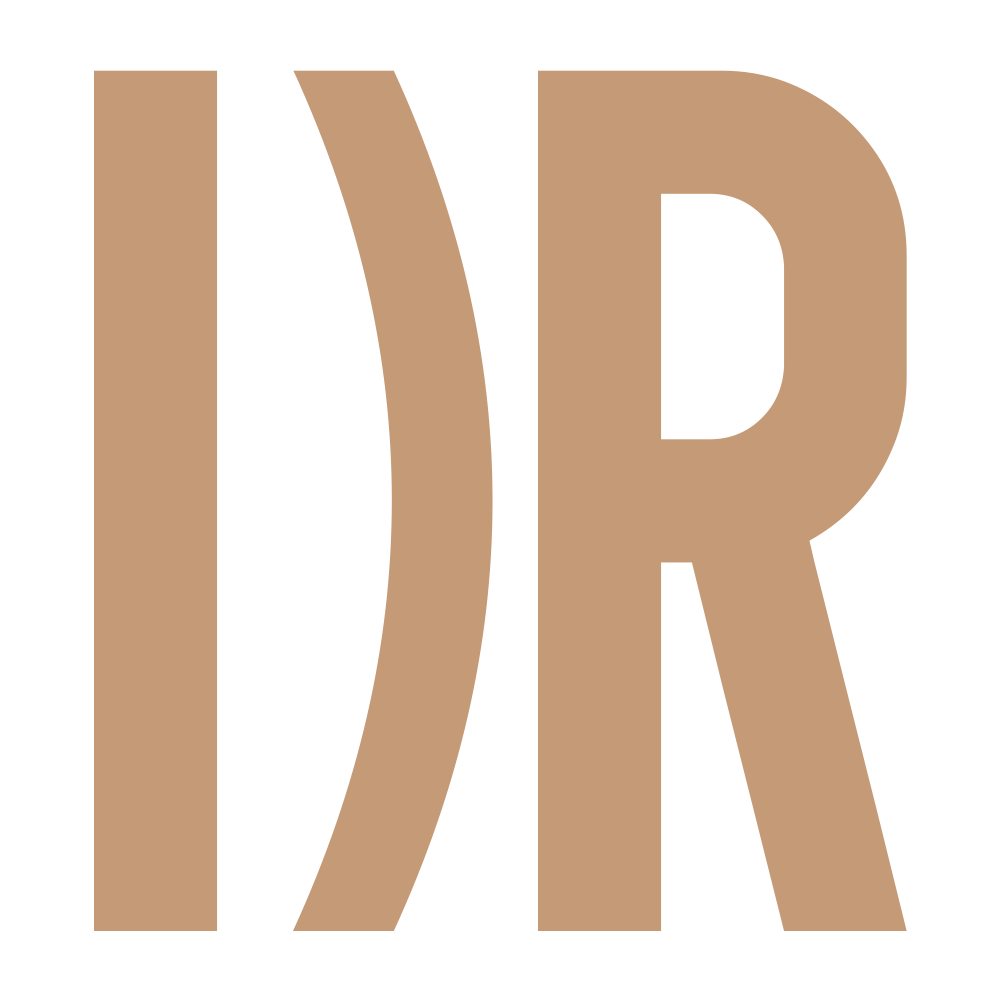
<style>
.page{position:relative;width:1000px;height:1000px;background:#ffffff}
.page>*{position:absolute;margin:0}
.t1{font:1036.8px "AbrahamDemo";color:#c49a77}
</style>
<div class="page">
<p class="t1" style="left:94px;top:70px;width:124px;height:861px">I</p>
<p class="t1" style="left:293px;top:70px;width:200px;height:861px">)</p>
<p class="t1" style="left:538px;top:70px;width:369px;height:861px">R</p>
</div>
